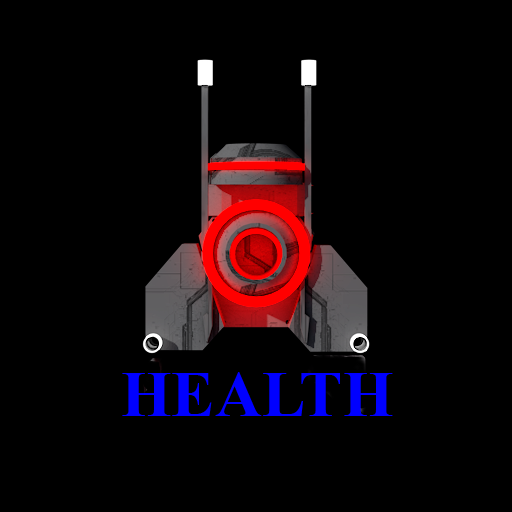
<style>
.page{position:relative;width:512px;height:512px;background:#000000}
.page>*{position:absolute;margin:0}
.t1{font:65px "TimesNewRomanPS-BoldMT";color:#0000ff}
</style>
<div class="page">
<p class="t1" style="left:122px;top:372px;width:271px;height:44px">HEALTH</p>
</div>
